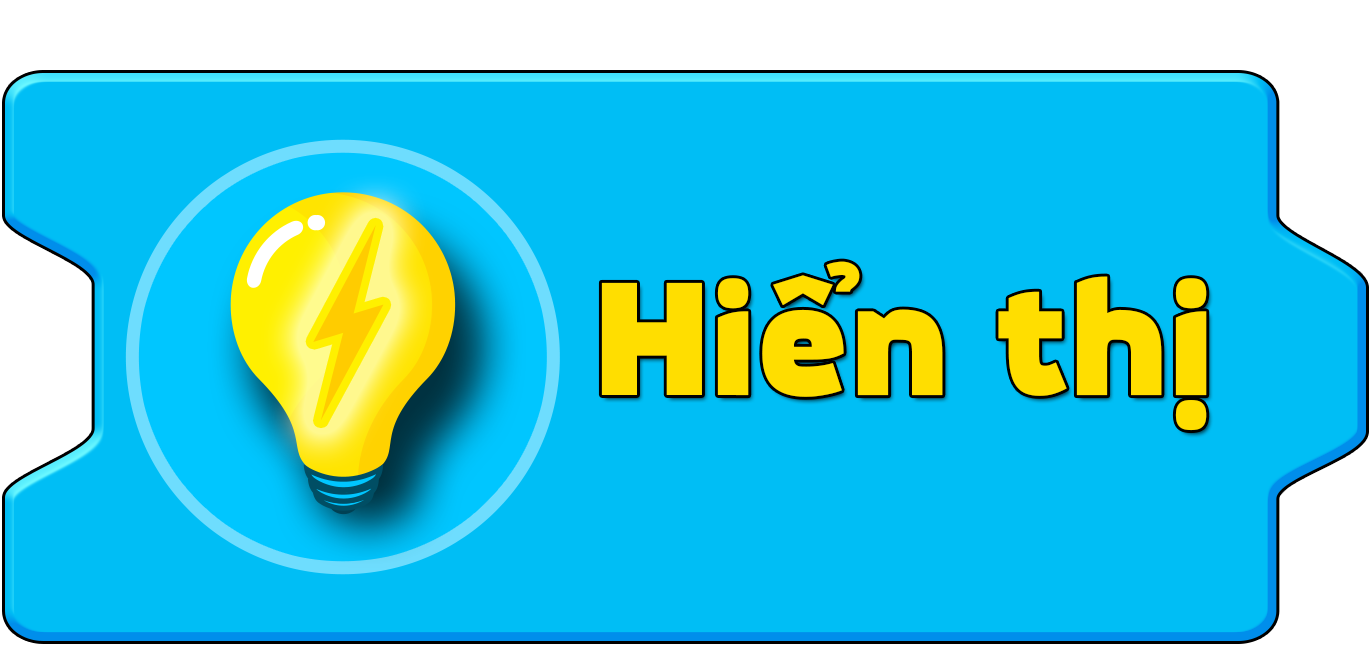
<style>
.page{position:relative;width:1371px;height:646px;background:#00bef5}
.page>*{position:absolute;margin:0}
.t1{font:157.8px "MovaviGrotesqueBlack";color:#ffde00}
</style>
<div class="page">
<p class="t1" style="left:601px;top:261px;width:606px;height:170px">Hiển thị</p>
</div>
